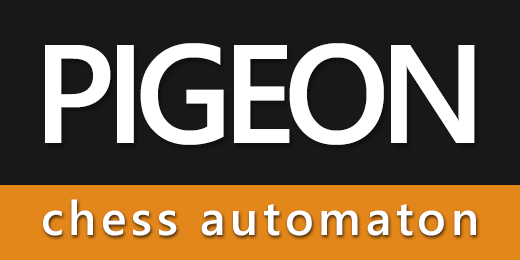
<style>
.page{position:relative;width:520px;height:260px;background:#181819}
.page>*{position:absolute;margin:0}
.t1{font:140px "SegoeUI-Semibold";letter-spacing:-0.075em;color:#ffffff}
.t2{font:48px "SegoeUI-Semibold";letter-spacing:0.1em;color:#ffffff}
</style>
<div class="page">
<p class="t1" style="left:45px;top:43px;width:430px;height:102px">PIGEON</p>
<p class="t2" style="left:43px;top:199px;width:433px;height:37px">chess automaton</p>
</div>
